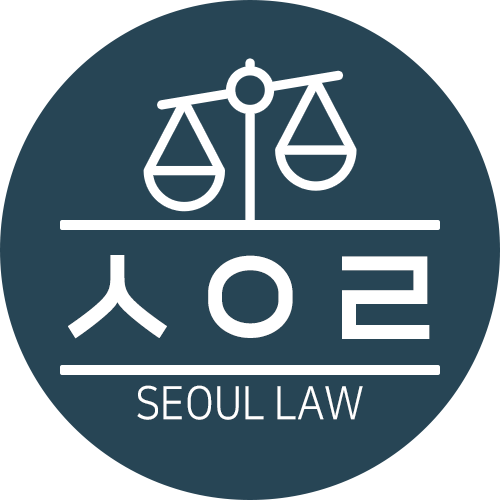
<style>
.page{position:relative;width:500px;height:500px;background:#274555}
.page>*{position:absolute;margin:0}
.t1{font:160.4px "NanumSquareOTFB";color:#ffffff;scale:0.91 1}
.t2{font:45.8px "NanumSquareOTFR";color:#ffffff;scale:0.91 1}
</style>
<div class="page">
<p class="t1" style="left:68px;top:255px;width:362px;height:84px">ㅅㅇㄹ</p>
<p class="t2" style="left:137px;top:385px;width:226px;height:35px">SEOUL LAW</p>
</div>
